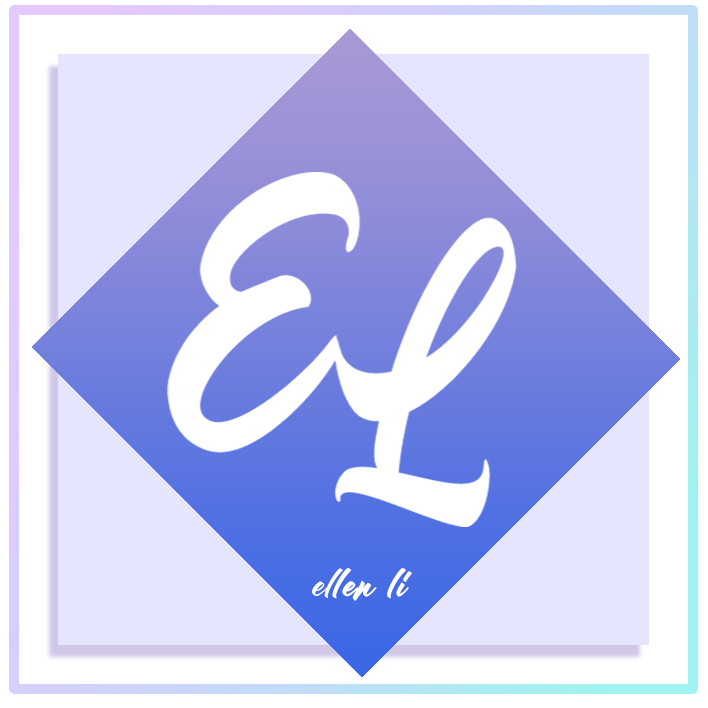
<style>
.page{position:relative;width:708px;height:708px;background:#e5e5fd}
.page>*{position:absolute;margin:0}
.t1{font:42.6px "Julietta";color:#ffffff;font-weight:bold;scale:1.09 1}
.t2{font:42.6px "Julietta";color:#ffffff;scale:1.09 1}
</style>
<div class="page">
<p class="t1" style="left:312px;top:568px;width:100px;height:33px"><span class="t2">el</span>len li</p>
</div>
